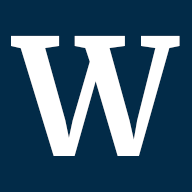
<style>
.page{position:relative;width:192px;height:192px;background:#022b48}
.page>*{position:absolute;margin:0}
.t1{font:160px "Merriweather-Bold";color:#ffffff}
</style>
<div class="page">
<p class="t1" style="left:11px;top:35px;width:169px;height:121px">W</p>
</div>
